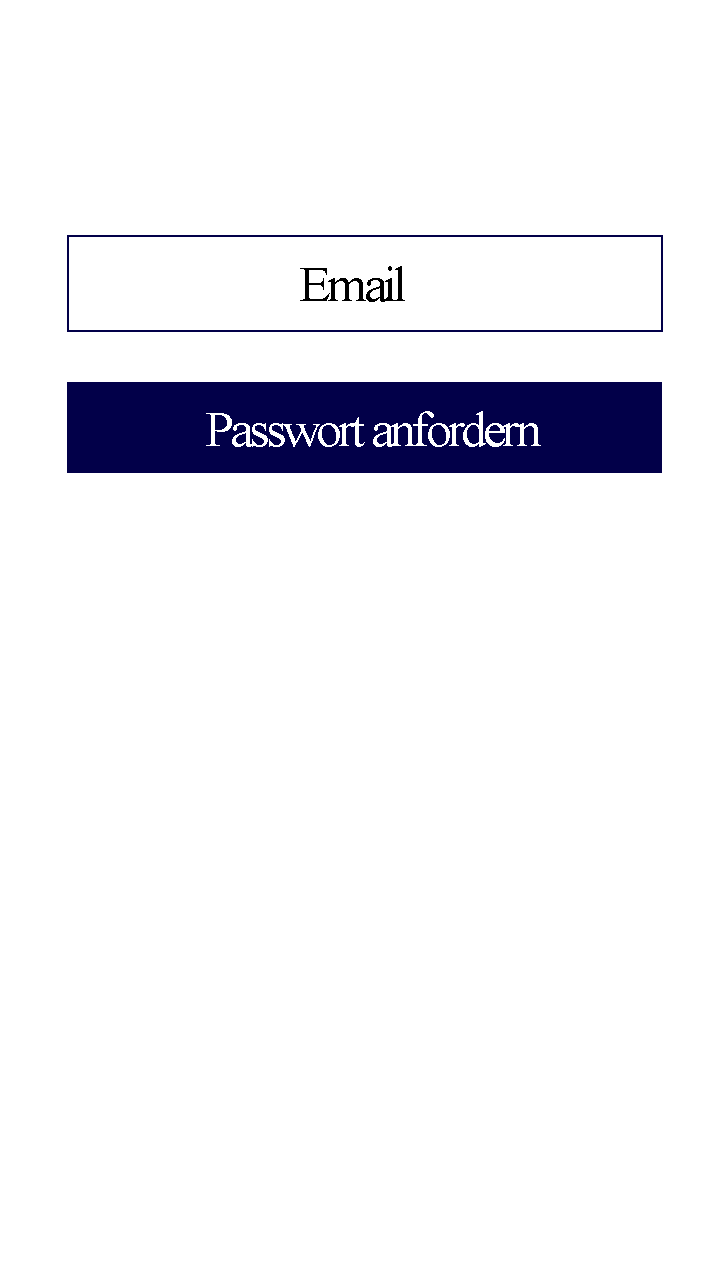
<style>
.page{position:relative;width:720px;height:1280px;background:#ffffff}
.page>*{position:absolute;margin:0}
.t1{font:50px "TimesNewRomanPSMT";letter-spacing:-0.075em;color:#ffffff;scale:1.04 1}
</style>
<div class="page">
<p class="t1" style="left:206px;top:411px;width:335px;height:36px">Passwort anfordern</p>
</div>
